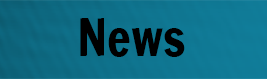
<style>
.page{position:relative;width:267px;height:79px}
.page>*{position:absolute;margin:0}
.t1{font:50px "FrancoisOne-Regular";color:#000000}
</style>
<div class="page">
<p class="t1" style="left:80px;top:18px;width:105px;height:39px">News</p>
</div>
